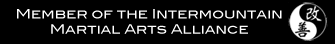
<style>
.page{position:relative;width:335px;height:44px;background:#000000}
.page>*{position:absolute;margin:0}
.t1{font:12.6px "BlairMdITCTTMedium";color:#ffffff}
</style>
<div class="page">
<p class="t1" style="left:17px;top:9px;width:265px;height:25px;text-align:center">Member of the Intermountain<br>Martial Arts Alliance</p>
</div>
